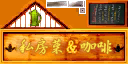
<style>
.page{position:relative;width:128px;height:64px}
.page>*{position:absolute;margin:0}
.t1{font:15px "JXC";color:#ffe64d;font-weight:bold}
.t2{font:16px "JXC";color:#ffe64d;font-weight:bold}
</style>
<div class="page">
<p class="t1" style="left:19px;top:38px;width:43px;height:16px">私房菜</p>
<p class="t2" style="left:80px;top:40px;width:32px;height:14px">咖啡</p>
</div>
